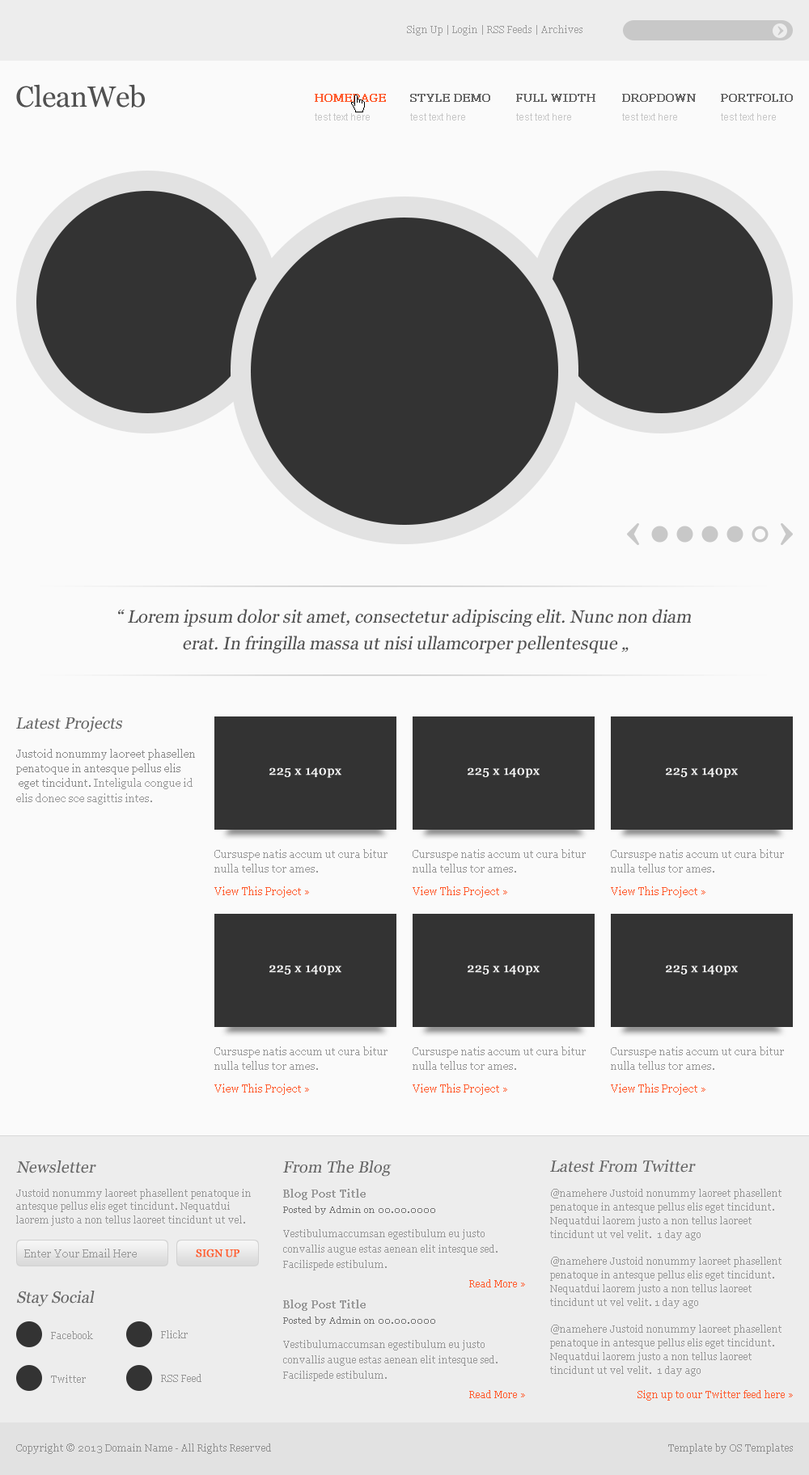
<style>
.page{position:relative;width:809px;height:1475px;background:#fafafa}
.page>*{position:absolute;margin:0}
.t1{font:9.7px "Georgia";color:#9f9f9f}
.t2{font:29.1px "Georgia";color:#505050}
.t3{font:11.3px "Georgia";color:#ff5d30;font-weight:bold}
.t4{font:11.3px "Georgia";color:#666666;font-weight:bold}
.t5{font:9.7px "ArialMT";color:#c7c7c7}
.t6{font:17.8px/26.7px "Georgia";color:#505050;font-style:italic}
.t7{font:17.8px/17.8px "Georgia";color:#505050;font-style:italic}
.t8{font:16.2px "Georgia";color:#666666;font-style:italic}
.t9{font:10.5px/14.7px "Georgia";color:#8b8b8b}
.t10{font:10.5px/14.7px "Georgia";color:#989898}
.t11{font:12.6px "Georgia";color:#f8f8f8;font-weight:bold}
.t12{font:10.5px "Georgia";color:#ff5d30}
.t13{font:9.7px/13.6px "Georgia";color:#989898}
.t14{font:10.5px "Georgia";color:#989898;font-weight:bold}
.t15{font:8.9px "Georgia";color:#757575}
.t16{font:9.7px/15.5px "Georgia";color:#989898}
.t17{font:10.5px "Georgia";color:#989898}
.t18{font:10.5px "Georgia";color:#ff5d30;text-transform:uppercase;font-weight:bold}
.t19{font:9.7px "Georgia";color:#ff5d30}
.t20{font:9.7px "Georgia";color:#989898}
.t21{font:9.7px "Georgia";color:#919191}
</style>
<div class="page">
<p class="t1" style="left:407px;top:25px;width:175px;height:11px">Sign Up | Login | RSS Feeds | Archives</p>
<p class="t2" style="left:16px;top:84px;width:129px;height:24px">CleanWeb</p>
<p class="t3" style="left:315px;top:94px;width:71px;height:8px">HOMEPAGE</p>
<p class="t4" style="left:410px;top:94px;width:80px;height:8px">STYLE DEMO</p>
<p class="t4" style="left:516px;top:94px;width:79px;height:8px">FULL WIDTH</p>
<p class="t4" style="left:622px;top:94px;width:73px;height:8px">DROPDOWN</p>
<p class="t4" style="left:720px;top:94px;width:72px;height:8px">PORTFOLIO</p>
<p class="t5" style="left:315px;top:113px;width:55px;height:7px">test text here</p>
<p class="t5" style="left:410px;top:113px;width:55px;height:7px">test text here</p>
<p class="t5" style="left:516px;top:113px;width:55px;height:7px">test text here</p>
<p class="t5" style="left:622px;top:113px;width:55px;height:7px">test text here</p>
<p class="t5" style="left:720px;top:113px;width:55px;height:7px">test text here</p>
<p class="t6" style="left:118px;top:609px;width:572px;height:44px;text-align:center"><span class="t7">“</span> Lorem ipsum dolor sit amet, consectetur adipiscing elit. Nunc non diam <br>erat. In fringilla massa ut nisi ullamcorper pellentesque „</p>
<p class="t8" style="left:16px;top:716px;width:106px;height:17px">Latest Projects</p>
<p class="t9" style="left:16px;top:749px;width:179px;height:56px">Justoid nonummy laoreet phasellen<br>penatoque in antesque pellus elis<br> eget tincidunt. <span class="t10">Inteligula congue id <br>elis donec sce sagittis intes.</span></p>
<p class="t11" style="left:269px;top:767px;width:72px;height:11px">225 x 140px</p>
<p class="t11" style="left:467px;top:767px;width:72px;height:11px">225 x 140px</p>
<p class="t11" style="left:665px;top:767px;width:72px;height:11px">225 x 140px</p>
<p class="t10" style="left:214px;top:849px;width:173px;height:23px">Cursuspe natis accum ut cura bitur nulla tellus tor ames.</p>
<p class="t10" style="left:412px;top:849px;width:173px;height:23px">Cursuspe natis accum ut cura bitur nulla tellus tor ames.</p>
<p class="t10" style="left:610px;top:849px;width:173px;height:23px">Cursuspe natis accum ut cura bitur nulla tellus tor ames.</p>
<p class="t12" style="left:214px;top:886px;width:95px;height:11px">View This Project »</p>
<p class="t12" style="left:412px;top:886px;width:95px;height:11px">View This Project »</p>
<p class="t12" style="left:610px;top:886px;width:95px;height:11px">View This Project »</p>
<p class="t11" style="left:269px;top:965px;width:72px;height:10px">225 x 140px</p>
<p class="t11" style="left:467px;top:965px;width:72px;height:10px">225 x 140px</p>
<p class="t11" style="left:665px;top:965px;width:72px;height:10px">225 x 140px</p>
<p class="t10" style="left:214px;top:1046px;width:173px;height:24px">Cursuspe natis accum ut cura bitur nulla tellus tor ames.</p>
<p class="t10" style="left:412px;top:1046px;width:173px;height:24px">Cursuspe natis accum ut cura bitur nulla tellus tor ames.</p>
<p class="t10" style="left:610px;top:1046px;width:173px;height:24px">Cursuspe natis accum ut cura bitur nulla tellus tor ames.</p>
<p class="t12" style="left:214px;top:1083px;width:95px;height:12px">View This Project »</p>
<p class="t12" style="left:412px;top:1083px;width:95px;height:12px">View This Project »</p>
<p class="t12" style="left:610px;top:1083px;width:95px;height:12px">View This Project »</p>
<p class="t8" style="left:16px;top:1160px;width:80px;height:13px">Newsletter</p>
<p class="t8" style="left:282px;top:1160px;width:109px;height:16px">From The Blog</p>
<p class="t8" style="left:550px;top:1159px;width:145px;height:13px">Latest From Twitter</p>
<p class="t13" style="left:16px;top:1189px;width:235px;height:37px">Justoid nonummy laoreet phasellent penatoque in antesque pellus elis eget tincidunt. Nequatdui laorem justo a non tellus laoreet tincidunt ut vel.</p>
<p class="t14" style="left:283px;top:1189px;width:82px;height:11px">Blog Post Title</p>
<p class="t13" style="left:550px;top:1189px;width:231px;height:187px">@namehere Justoid nonummy laoreet phasellent penatoque in antesque pellus elis eget tincidunt. Nequatdui laorem justo a non tellus laoreet tincidunt ut vel velit.  1 day ago<br><br>@namehere Justoid nonummy laoreet phasellent penatoque in antesque pellus elis eget tincidunt. Nequatdui laorem justo a non tellus laoreet tincidunt ut vel velit. 1 day ago<br><br>@namehere Justoid nonummy laoreet phasellent penatoque in antesque pellus elis eget tincidunt. Nequatdui laorem justo a non tellus laoreet tincidunt ut vel velit.  1 day ago</p>
<p class="t15" style="left:283px;top:1206px;width:152px;height:8px">Posted by Admin on 00.00.0000</p>
<p class="t16" style="left:283px;top:1229px;width:214px;height:41px">Vestibulumaccumsan egestibulum eu justo convallis augue estas aenean elit intesque sed. Facilispede estibulum.</p>
<p class="t17" style="left:24px;top:1248px;width:113px;height:9px">Enter Your Email Here</p>
<p class="t18" style="left:196px;top:1248px;width:43px;height:9px">SIGN UP</p>
<p class="t19" style="left:469px;top:1279px;width:56px;height:8px">Read More »</p>
<p class="t8" style="left:17px;top:1290px;width:78px;height:17px">Stay Social</p>
<p class="t14" style="left:283px;top:1299px;width:82px;height:12px">Blog Post Title</p>
<p class="t15" style="left:283px;top:1316px;width:152px;height:9px">Posted by Admin on 00.00.0000</p>
<p class="t20" style="left:51px;top:1331px;width:42px;height:8px">Facebook</p>
<p class="t20" style="left:161px;top:1330px;width:27px;height:8px">Flickr</p>
<p class="t16" style="left:283px;top:1340px;width:214px;height:41px">Vestibulumaccumsan egestibulum eu justo convallis augue estas aenean elit intesque sed. Facilispede estibulum.</p>
<p class="t20" style="left:161px;top:1374px;width:40px;height:8px">RSS Feed</p>
<p class="t20" style="left:51px;top:1375px;width:35px;height:8px">Twitter</p>
<p class="t19" style="left:469px;top:1390px;width:56px;height:8px">Read More »</p>
<p class="t19" style="left:637px;top:1390px;width:155px;height:10px">Sign up to our Twitter feed here »</p>
<p class="t21" style="left:16px;top:1443px;width:255px;height:11px">Copyright © 2013 Domain Name - All Rights Reserved</p>
<p class="t21" style="left:668px;top:1443px;width:124px;height:11px">Template by OS Templates</p>
</div>
